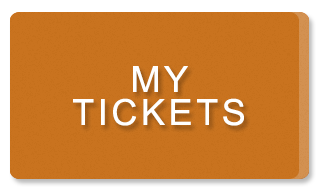
<style>
.page{position:relative;width:320px;height:192px;background:#c9731f}
.page>*{position:absolute;margin:0}
.t1{font:36px/33px "ArialMT";letter-spacing:0.1em;color:#ffffff;text-transform:uppercase}
</style>
<div class="page">
<p class="t1" style="left:73px;top:66px;width:171px;height:60px;text-align:center">My<br>Tickets</p>
</div>
